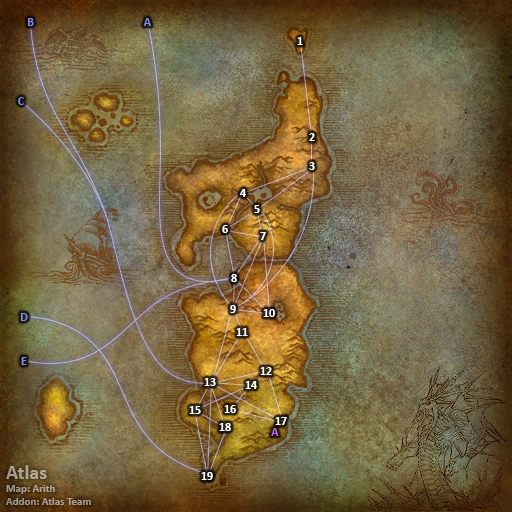
<style>
.page{position:relative;width:512px;height:512px}
.page>*{position:absolute;margin:0}
.t1{font:12px "Calibri-Bold";color:#8788ee}
.t2{font:12px "Calibri-Bold";color:#ffffff}
.t3{font:12px "Calibri-Bold";color:#bb66ff}
.t4{font:11px "Calibri-Bold";color:#aca092}
.t5{font:20px "Calibri-Bold";color:#aca092}
</style>
<div class="page">
<p class="t1" style="left:28px;top:18px;width:6px;height:8px">B</p>
<p class="t1" style="left:143px;top:18px;width:8px;height:8px">A</p>
<p class="t2" style="left:297px;top:37px;width:6px;height:8px">1</p>
<p class="t1" style="left:18px;top:97px;width:6px;height:8px">C</p>
<p class="t2" style="left:309px;top:133px;width:6px;height:8px">2</p>
<p class="t2" style="left:309px;top:162px;width:6px;height:8px">3</p>
<p class="t2" style="left:240px;top:189px;width:6px;height:8px">4</p>
<p class="t2" style="left:254px;top:205px;width:6px;height:8px">5</p>
<p class="t2" style="left:222px;top:225px;width:6px;height:8px">6</p>
<p class="t2" style="left:260px;top:232px;width:6px;height:8px">7</p>
<p class="t2" style="left:231px;top:274px;width:6px;height:8px">8</p>
<p class="t2" style="left:230px;top:305px;width:6px;height:8px">9</p>
<p class="t1" style="left:20px;top:313px;width:8px;height:8px">D</p>
<p class="t2" style="left:263px;top:309px;width:12px;height:8px">10</p>
<p class="t2" style="left:236px;top:328px;width:12px;height:8px">11</p>
<p class="t1" style="left:21px;top:357px;width:6px;height:8px">E</p>
<p class="t2" style="left:260px;top:367px;width:12px;height:8px">12</p>
<p class="t2" style="left:204px;top:378px;width:12px;height:8px">13</p>
<p class="t2" style="left:245px;top:381px;width:12px;height:8px">14</p>
<p class="t2" style="left:189px;top:406px;width:12px;height:8px">15</p>
<p class="t2" style="left:224px;top:405px;width:12px;height:8px">16</p>
<p class="t2" style="left:219px;top:423px;width:12px;height:8px">18</p>
<p class="t2" style="left:275px;top:417px;width:12px;height:8px">17</p>
<p class="t3" style="left:271px;top:428px;width:8px;height:8px">A</p>
<p class="t4" style="left:6px;top:465px;width:85px;height:40px"><span class="t5">Atlas<br></span>Map: Arith<br>Addon: Atlas Team</p>
<p class="t2" style="left:201px;top:472px;width:12px;height:8px">19</p>
</div>
